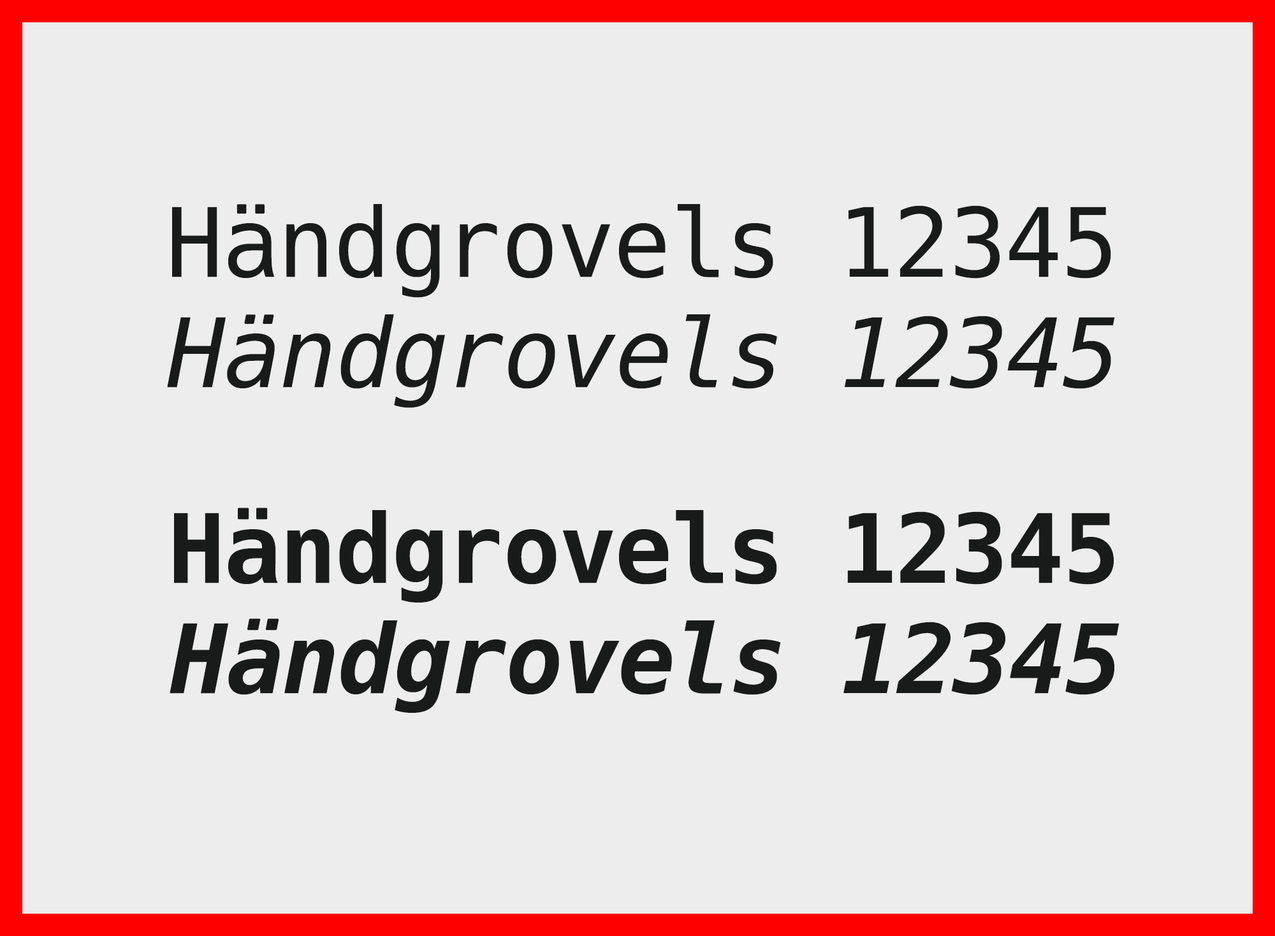
<style>
.page{position:relative;width:1275px;height:936px;background:#ededee}
.page>*{position:absolute;margin:0}
.t1{font:95.6px "Hack-Regular";letter-spacing:-0.015em;color:#191a1a}
.t2{font:95.6px "Hack-RegularOblique";letter-spacing:-0.015em;color:#191a1a}
.t3{font:95.6px "Hack-Bold";letter-spacing:-0.015em;color:#191a1a}
.t4{font:95.6px "Hack-BoldOblique";letter-spacing:-0.015em;color:#191a1a}
</style>
<div class="page">
<p class="t1" style="left:172px;top:204px;width:939px;height:94px">Händgrovels 12345</p>
<p class="t2" style="left:167px;top:314px;width:948px;height:94px">Händgrovels 12345</p>
<p class="t3" style="left:174px;top:507px;width:939px;height:95px">Händgrovels 12345</p>
<p class="t4" style="left:170px;top:618px;width:949px;height:94px">Händgrovels 12345</p>
</div>
